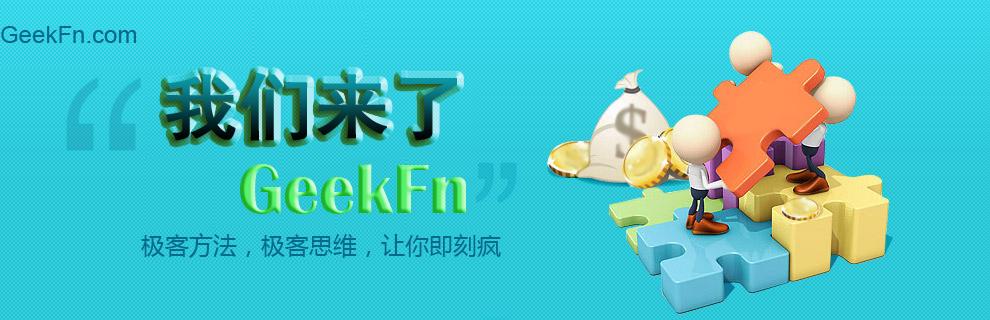
<style>
.page{position:relative;width:990px;height:320px}
.page>*{position:absolute;margin:0}
.t1{font:24px "ArialMT";color:#08698a}
.t2{font:72px "SimHei";font-weight:bold;scale:1.03 1}
.t3{font:72px "BritannicBold"}
.t4{font:24px "MicrosoftYaHei";color:#08698a}
</style>
<div class="page">
<p class="t1" style="left:1px;top:26px;width:136px;height:17px">GeekFn.com</p>
<p class="t2" style="left:166px;top:73px;width:291px;height:68px">我们来了</p>
<p class="t3" style="left:240px;top:164px;width:226px;height:50px">GeekFn</p>
<p class="t4" style="left:141px;top:233px;width:360px;height:25px">极客方法，极客思维，让你即刻疯</p>
</div>
